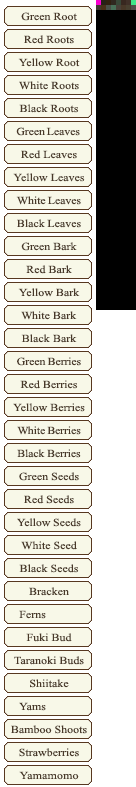
<style>
.page{position:relative;width:136px;height:787px;background:#f8f8e8}
.page>*{position:absolute;margin:0}
.t1{font:10.8px/23px "TimesNewRomanPSMT";color:#483828;scale:1.11 1}
.t2{font:10.8px/23px "TimesNewRomanPSMT";letter-spacing:-0.01em;color:#483828;scale:1.09 1}
.t3{font:10.8px/23px "TimesNewRomanPSMT";letter-spacing:-0.01em;color:#483828;scale:1.11 1}
.t4{font:10.8px/23px "TimesNewRomanPSMT";letter-spacing:-0.025em;color:#483828;scale:1.11 1}
.t5{font:10.8px/23px "TimesNewRomanPSMT";letter-spacing:-0.05em;color:#483828;scale:1.11 1}
.t6{font:10.8px/23px "TimesNewRomanPSMT";letter-spacing:-0.02em;color:#483828;scale:1.11 1}
.t7{font:10.8px/23px "TimesNewRomanPSMT";letter-spacing:-0.075em;color:#483828;scale:1.11 1}
.t8{font:10.8px/23px "TimesNewRomanPSMT";letter-spacing:-0.015em;color:#483828;scale:1.11 1}
.t9{font:10.8px/23px "TimesNewRomanPSMT";letter-spacing:0.01em;color:#483828;scale:1.11 1}
</style>
<div class="page">
<p class="t1" style="left:11px;top:12px;width:76px;height:768px;text-align:center">Green Root<br>Red Roots<br>Yellow Root<br>White Roots<br>Black Roots<br><span class="t2">G</span><span class="t3">reen Leaves <br></span>Red Leaves<br>Yellow Leaves<br><span class="t3">White Leaves<br></span>Black Leaves<br><span class="t3">G</span><span class="t4">r</span>een Bark<br>Red Bark<br>Yellow Bark<br><span class="t5">W</span>hite Bark<br>Black Bark<br><span class="t3">Green Be</span><span class="t6">rr</span><span class="t3">ies<br></span>Red Berries<br>Yellow Berries<br> <span class="t7">W</span><span class="t3">hite </span><span class="t4">Be</span><span class="t3">rries<br></span><span class="t8">Black Berries<br></span>Green Seeds<br>Red Seeds<br><span class="t3">Yellow </span>Seeds<br>White Seed<br>Black Seeds<br>Bracken<br>Ferns           <br>Fuki Bud<br>Taranoki Buds<br>Shiitake<br>Yams           <br>Bamboo Shoots<br>Strawberries<br><span class="t9">Yamamomo</span></p>
</div>
